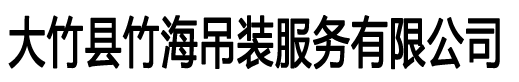
<style>
.page{position:relative;width:519px;height:82px;background:#ffffff}
.page>*{position:absolute;margin:0}
.t1{font:54px "MicrosoftYaHei";letter-spacing:0.03em;color:#000000;font-weight:bold;scale:0.67 1}
</style>
<div class="page">
<p class="t1" style="left:8px;top:15px;width:492px;height:55px">大竹县竹海吊装服务有限公司</p>
</div>
